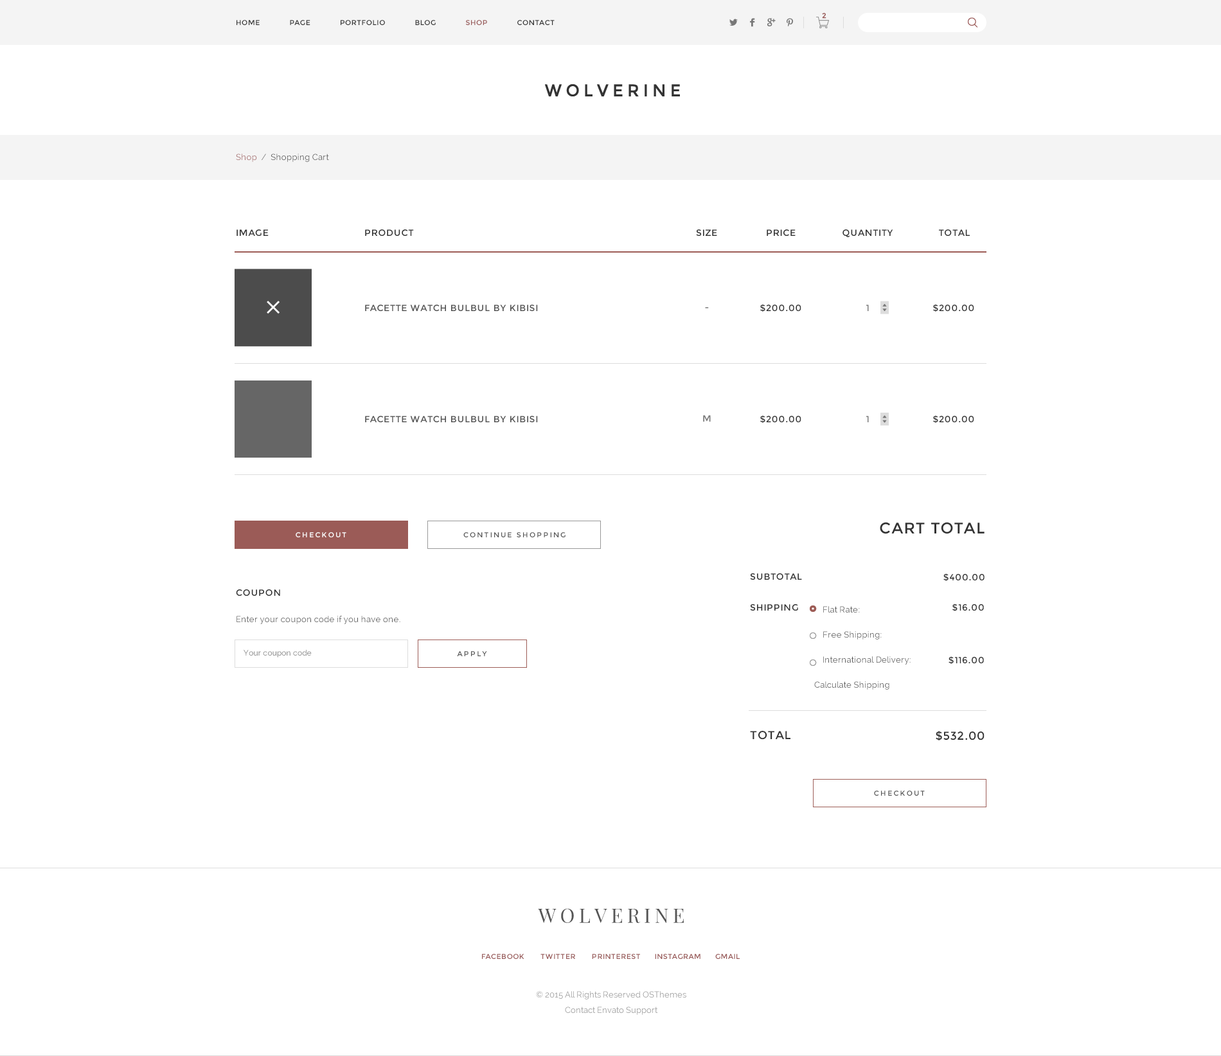
<style>
.page{position:relative;width:1221px;height:1056px;background:#ffffff}
.page>*{position:absolute;margin:0}
.t1{font:7.1px "Montserrat-Regular";color:#9a5a58;font-weight:bold}
.t2{font:7.1px "Montserrat-Regular";letter-spacing:0.05em;color:#333333}
.t3{font:7.1px "Montserrat-Regular";letter-spacing:0.05em;color:#995958}
.t4{font:8.4px "Raleway";letter-spacing:0.02em;color:#545454}
.t5{font:8.4px "Raleway";letter-spacing:0.02em;color:#a56c6c}
.t6{font:8.4px "Raleway";letter-spacing:0.02em;color:#777777}
.t7{font:9px "Montserrat-Regular";letter-spacing:0.05em;color:#333333}
.t8{font:9px "Montserrat-Regular";letter-spacing:0.05em;color:#555555}
.t9{font:9px "Montserrat-Regular";letter-spacing:0.05em;color:#777777}
.t10{font:7.1px "Montserrat-Regular";letter-spacing:0.2em;color:#ffffff}
.t11{font:7.1px "Montserrat-Regular";letter-spacing:0.2em;color:#555555}
.t12{font:15.4px "Montserrat-Regular";letter-spacing:0.05em;color:#333333}
.t13{font:8.4px "Raleway";letter-spacing:0.02em;color:#555555}
.t14{font:8.4px/25.1px "Raleway";letter-spacing:0.02em;color:#545454}
.t15{font:7.7px "Raleway";letter-spacing:0.02em;color:#777777}
.t16{font:11.6px "Montserrat-Regular";letter-spacing:0.05em;color:#333333}
.t17{font:7.1px "Montserrat-Regular";letter-spacing:0.2em;color:#545454}
.t18{font:19.9px "PlayfairDisplay-Regular";letter-spacing:0.1em;color:#555555}
.t19{font:8.4px/15px "Raleway";color:#999999}
</style>
<div class="page">
<p class="t1" style="left:822px;top:13px;width:5px;height:6px">2</p>
<p class="t2" style="left:237px;top:20px;width:318px;height:5px">HOME      PAGE      PORTFOLIO      BLOG      <span class="t3">SHOP </span>     CONTACT</p>
<p class="t4" style="left:236px;top:154px;width:93px;height:8px"><span class="t5">Shop</span><span class="t6">  /  </span>Shopping Cart</p>
<p class="t7" style="left:237px;top:230px;width:32px;height:6px">IMAGE</p>
<p class="t7" style="left:365px;top:230px;width:49px;height:6px">PRODUCT</p>
<p class="t7" style="left:696px;top:230px;width:21px;height:6px">SIZE</p>
<p class="t7" style="left:767px;top:230px;width:29px;height:6px">PRICE</p>
<p class="t7" style="left:843px;top:230px;width:51px;height:7px">QUANTITY</p>
<p class="t7" style="left:939px;top:230px;width:31px;height:6px">TOTAL</p>
<p class="t8" style="left:365px;top:305px;width:173px;height:6px">FACETTE WATCH BULBUL BY KIBISI</p>
<p class="t7" style="left:760px;top:304px;width:42px;height:8px">$200.00</p>
<p class="t9" style="left:867px;top:305px;width:2px;height:6px">1</p>
<p class="t7" style="left:933px;top:304px;width:42px;height:8px">$200.00</p>
<p class="t9" style="left:705px;top:307px;width:4px;height:2px">-</p>
<p class="t8" style="left:365px;top:416px;width:173px;height:6px">FACETTE WATCH BULBUL BY KIBISI</p>
<p class="t9" style="left:703px;top:415px;width:8px;height:7px">M</p>
<p class="t7" style="left:760px;top:415px;width:42px;height:8px">$200.00</p>
<p class="t9" style="left:867px;top:416px;width:2px;height:6px">1</p>
<p class="t7" style="left:933px;top:415px;width:42px;height:8px">$200.00</p>
<p class="t10" style="left:296px;top:532px;width:50px;height:5px">CHECKOUT</p>
<p class="t11" style="left:464px;top:532px;width:102px;height:5px">CONTINUE SHOPPING</p>
<p class="t12" style="left:880px;top:522px;width:105px;height:12px">CART TOTAL</p>
<p class="t7" style="left:750px;top:573px;width:52px;height:7px">SUBTOTAL</p>
<p class="t7" style="left:944px;top:573px;width:41px;height:8px">$400.00</p>
<p class="t7" style="left:236px;top:590px;width:44px;height:6px">COUPON</p>
<p class="t7" style="left:750px;top:604px;width:48px;height:7px">SHIPPING</p>
<p class="t7" style="left:953px;top:604px;width:31px;height:7px">$16.00</p>
<p class="t13" style="left:237px;top:616px;width:164px;height:8px">Enter your coupon code if you have one.</p>
<p class="t14" style="left:815px;top:606px;width:96px;height:84px">Flat Rate:<br>    Free Shipping:<br>    International Delivery:<br>Calculate Shipping</p>
<p class="t15" style="left:244px;top:650px;width:68px;height:8px">Your coupon code</p>
<p class="t11" style="left:457px;top:651px;width:30px;height:5px">APPLY</p>
<p class="t7" style="left:949px;top:656px;width:35px;height:8px">$116.00</p>
<p class="t16" style="left:750px;top:731px;width:41px;height:9px">TOTAL</p>
<p class="t16" style="left:936px;top:731px;width:49px;height:10px">$532.00</p>
<p class="t17" style="left:874px;top:791px;width:51px;height:5px">CHECKOUT</p>
<p class="t18" style="left:538px;top:908px;width:146px;height:15px">WOLVERINE</p>
<p class="t3" style="left:482px;top:954px;width:258px;height:5px">FACEBOOK       TWITTER       PRINTEREST      INSTAGRAM      GMAIL</p>
<p class="t19" style="left:536px;top:991px;width:151px;height:24px;text-align:center">© 2015 All Rights Reserved OSThemes<br>Contact Envato Support</p>
</div>
